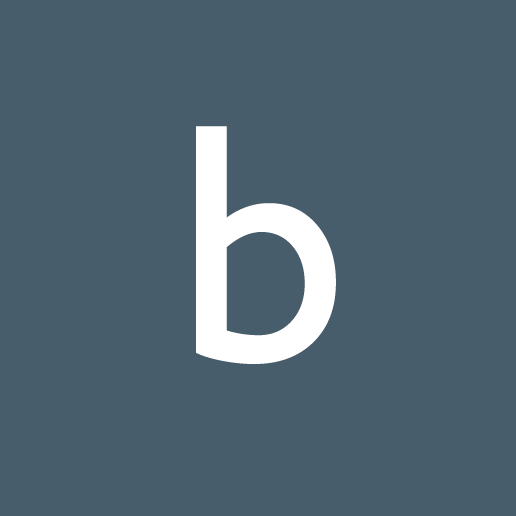
<style>
.page{position:relative;width:516px;height:516px;background:#485d6b}
.page>*{position:absolute;margin:0}
.t1{font:344.1px "GillSansMT";color:#ffffff}
</style>
<div class="page">
<p class="t1" style="left:196px;top:126px;width:140px;height:238px">b</p>
</div>
